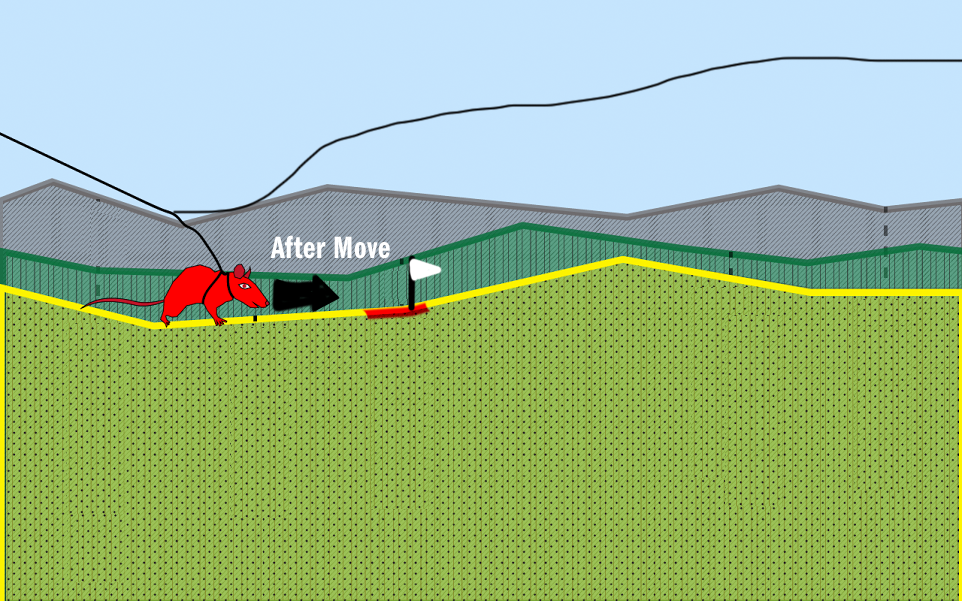
<style>
.page{position:relative;width:962px;height:601px}
.page>*{position:absolute;margin:0}
.t1{font:32px "ITCFranklinGothicStd-DmCp";letter-spacing:0.02em;color:#ffffff}
</style>
<div class="page">
<p class="t1" style="left:270px;top:235px;width:120px;height:24px">After Move</p>
</div>
